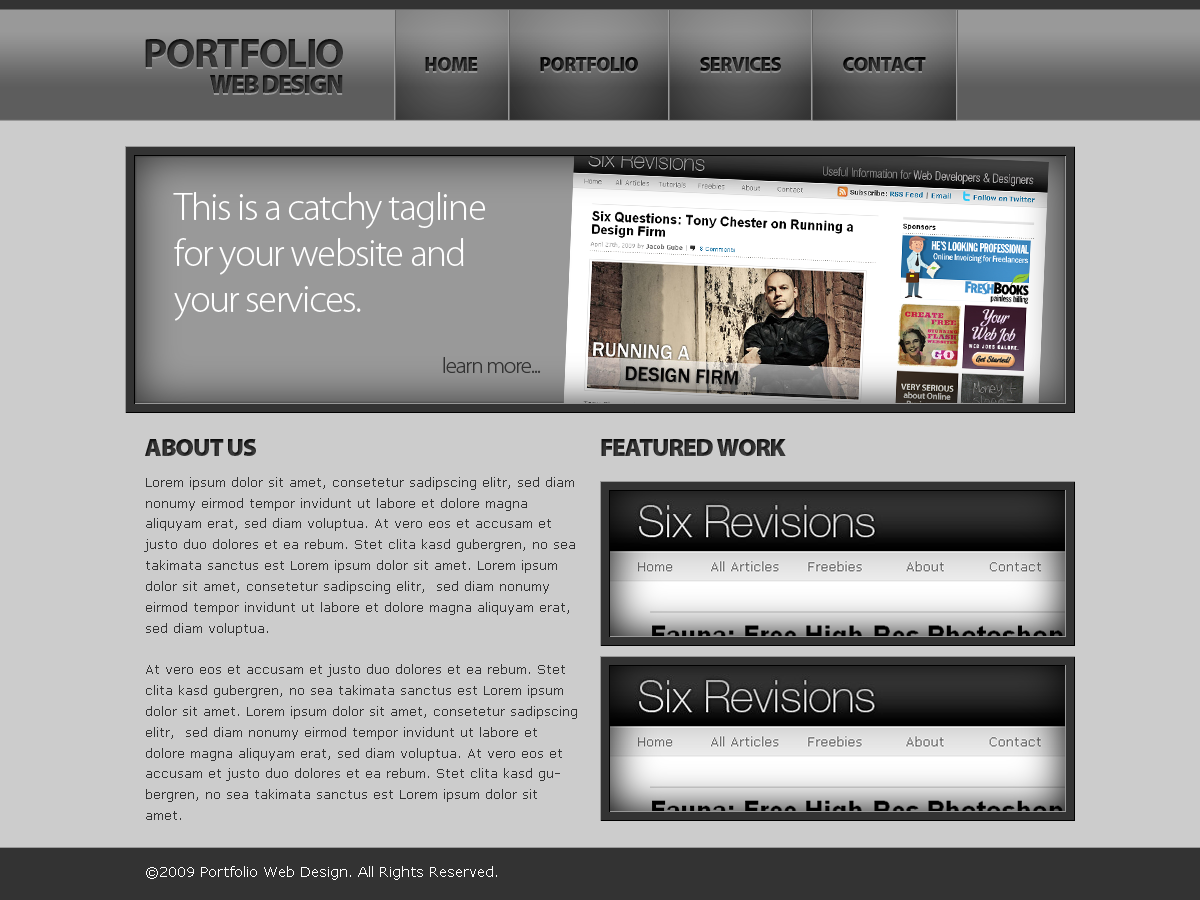
<style>
.page{position:relative;width:1200px;height:900px;background:#cccccc}
.page>*{position:absolute;margin:0}
.t1{font:41.4px "MyriadPro-Bold";letter-spacing:-0.04em;color:#333333;text-transform:uppercase}
.t2{font:19.8px "MyriadPro-Black";letter-spacing:-0.04em;color:#333333;text-transform:uppercase}
.t3{font:19.8px "MyriadPro-Black";letter-spacing:-0.04em;color:#1c1c1c;text-transform:uppercase}
.t4{font:19.8px "MyriadPro-Black";letter-spacing:-0.04em;color:#1d1d1d;text-transform:uppercase}
.t5{font:19.8px "MyriadPro-Black";letter-spacing:-0.04em;color:#202020;text-transform:uppercase}
.t6{font:25.5px "MyriadPro-Black";letter-spacing:-0.06em;color:#333333;text-transform:uppercase}
.t7{font:39.3px/45.8px "MyriadPro-Light";letter-spacing:-0.04em;color:#ffffff}
.t8{font:22.6px "MyriadPro-Light";letter-spacing:-0.04em;color:#333333}
.t9{font:25px "MyriadPro-Black";letter-spacing:-0.04em;color:#333333;text-transform:uppercase}
.t10{font:12.5px/20.8px "Verdana";color:#333333}
.t11{font:39.3px/20.8px "MyriadPro-Light";letter-spacing:-0.04em;color:#0033cc}
.t12{font:14.3px "Verdana";color:#ffffff}
</style>
<div class="page">
<p class="t1" style="left:145px;top:39px;width:198px;height:28px">Portfolio</p>
<p class="t2" style="left:425px;top:57px;width:53px;height:14px">Home</p>
<p class="t3" style="left:540px;top:57px;width:98px;height:14px">Portfolio</p>
<p class="t4" style="left:700px;top:57px;width:81px;height:14px">Services</p>
<p class="t5" style="left:843px;top:57px;width:83px;height:14px">Contact</p>
<p class="t6" style="left:210px;top:75px;width:133px;height:18px">WEB DESIGN</p>
<p class="t7" style="left:173px;top:192px;width:313px;height:129px">This is a catchy tagline <br>for your website and <br>your services.</p>
<p class="t8" style="left:443px;top:357px;width:98px;height:16px">learn more...</p>
<p class="t9" style="left:145px;top:439px;width:111px;height:17px">About Us</p>
<p class="t9" style="left:601px;top:439px;width:185px;height:17px">Featured Work</p>
<p class="t10" style="left:144px;top:477px;width:433px;height:343px"><span class="t11"><br></span>Lorem ipsum dolor sit amet, consetetur sadipscing elitr, sed diam nonumy eirmod tempor invidunt ut labore et dolore magna aliquyam erat, sed diam voluptua. At vero eos et accusam et justo duo dolores et ea rebum. Stet clita kasd gubergren, no sea takimata sanctus est Lorem ipsum dolor sit amet. Lorem ipsum dolor sit amet, consetetur sadipscing elitr,  sed diam nonumy eirmod tempor invidunt ut labore et dolore magna aliquyam erat, sed diam voluptua. <br><br>At vero eos et accusam et justo duo dolores et ea rebum. Stet clita kasd gubergren, no sea takimata sanctus est Lorem ipsum dolor sit amet. Lorem ipsum dolor sit amet, consetetur sadipscing elitr,  sed diam nonumy eirmod tempor invidunt ut labore et dolore magna aliquyam erat, sed diam voluptua. At vero eos et accusam et justo duo dolores et ea rebum. Stet clita kasd gubergren, no sea takimata sanctus est Lorem ipsum dolor sit amet.</p>
<p class="t12" style="left:146px;top:866px;width:351px;height:14px">©2009 Portfolio Web Design. All Rights Reserved.</p>
</div>
